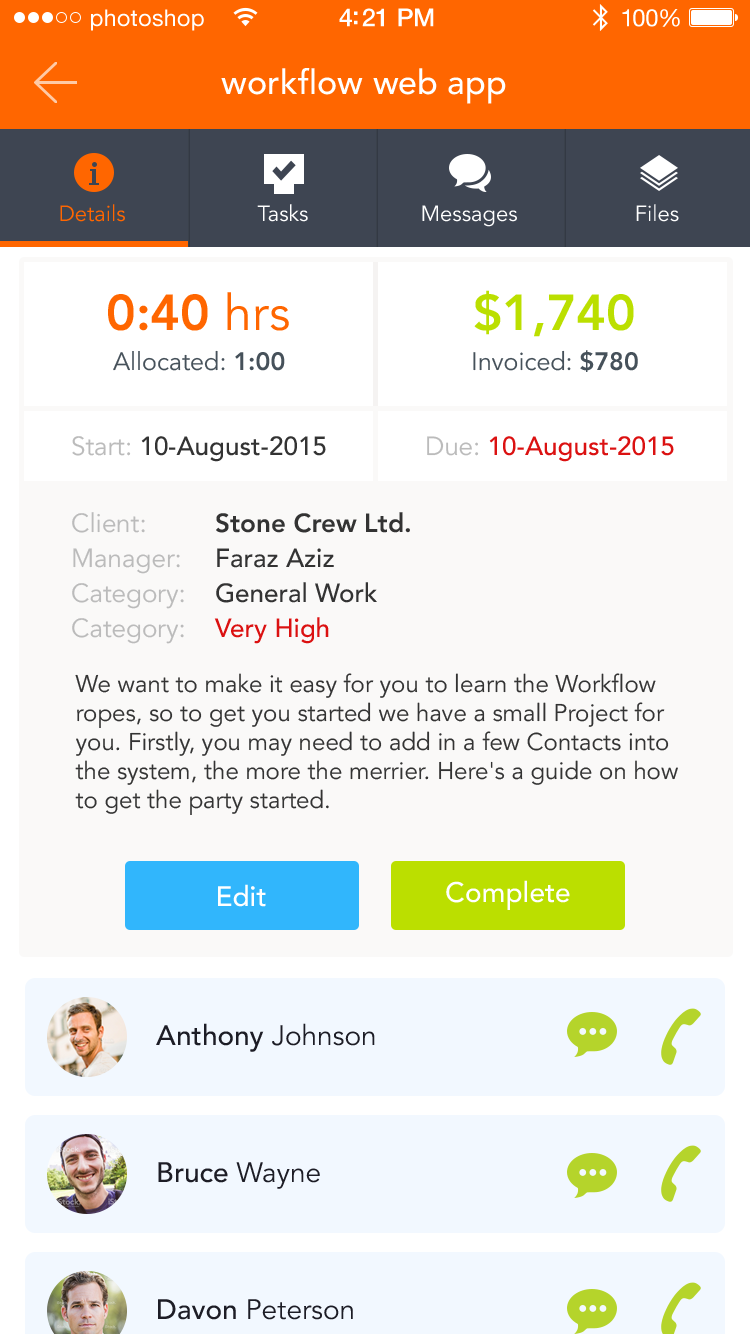
<style>
.page{position:relative;width:750px;height:1334px;background:#faf9f8}
.page>*{position:absolute;margin:0}
.t1{font:23px "HelveticaNeue";letter-spacing:0.02em;color:#ffffff}
.t2{font:25px "HelveticaNeue-Medium";letter-spacing:-0.02em;color:#ffffff}
.t3{font:24px "HelveticaNeue";letter-spacing:-0.02em;color:#ffffff}
.t4{font:34px "Avenir-Medium";color:#ffffff}
.t5{font:22px "Avenir-Book";color:#ff6600}
.t6{font:22px "Avenir-Book";color:#ffffff}
.t7{font:50px "Avenir-Heavy";color:#ff6600}
.t8{font:50px "Avenir-Book";color:#ff6600}
.t9{font:50px "Avenir-Heavy";color:#bbdf00}
.t10{font:25px "Avenir-Book";color:#46515a}
.t11{font:25px "Avenir-Heavy";color:#46515a}
.t12{font:26px "Avenir-Medium";color:#333333}
.t13{font:26px "Avenir-Book";color:#bbbbbb}
.t14{font:26px "Avenir-Medium";color:#db1111}
.t15{font:26px/35px "Avenir-Heavy";color:#333333}
.t16{font:26px/35px "Avenir-Book";color:#bbbbbb}
.t17{font:26px/35px "Avenir-Medium";color:#333333}
.t18{font:26px/35px "Avenir-Medium";color:#db1111}
.t19{font:24px "Avenir-Book";color:#333333}
.t20{font:28px "Avenir-Medium";color:#ffffff}
.t21{font:28px "Avenir-Medium";color:#1d1d26}
.t22{font:28px "Avenir-Book";color:#1d1d26}
</style>
<div class="page">
<p class="t1" style="left:91px;top:9px;width:113px;height:22px">photoshop</p>
<p class="t2" style="left:339px;top:8px;width:95px;height:19px">4:21 PM</p>
<p class="t3" style="left:622px;top:9px;width:58px;height:18px">100%</p>
<p class="t4" style="left:221px;top:68px;width:285px;height:36px">workflow web app</p>
<p class="t5" style="left:60px;top:204px;width:65px;height:18px">Details</p>
<p class="t6" style="left:257px;top:204px;width:51px;height:18px">Tasks</p>
<p class="t6" style="left:422px;top:205px;width:95px;height:22px">Messages</p>
<p class="t6" style="left:636px;top:204px;width:43px;height:18px">Files</p>
<p class="t7" style="left:108px;top:292px;width:181px;height:39px">0:40 <span class="t8">hrs</span></p>
<p class="t9" style="left:474px;top:290px;width:160px;height:47px">$1,740</p>
<p class="t10" style="left:113px;top:350px;width:172px;height:21px">Allocated: <span class="t11">1:00</span></p>
<p class="t10" style="left:473px;top:350px;width:165px;height:22px">Invoiced: <span class="t11">$780</span></p>
<p class="t12" style="left:72px;top:436px;width:254px;height:26px"><span class="t13">Start: </span>10-August-2015</p>
<p class="t14" style="left:427px;top:436px;width:247px;height:26px"><span class="t13">Due: </span>10-August-2015</p>
<p class="t15" style="left:72px;top:512px;width:338px;height:132px"><span class="t16">Client:   </span>Stone Crew Ltd.<br><span class="t16">Manager:  </span><span class="t17">Faraz Aziz<br></span><span class="t16">Category:  </span><span class="t17">General Work<br></span><span class="t16">Category:  </span><span class="t18">Very High</span></p>
<p class="t19" style="left:75px;top:673px;width:603px;height:142px">We want to make it easy for you to learn the Workflow ropes, so to get you started we have a small Project for you. Firstly, you may need to add in a few Contacts into the system, the more the merrier. Here's a guide on how to get the party started.</p>
<p class="t20" style="left:446px;top:880px;width:124px;height:30px">Complete</p>
<p class="t20" style="left:218px;top:884px;width:48px;height:23px">Edit</p>
<p class="t21" style="left:156px;top:1023px;width:219px;height:29px">Anthony <span class="t22">Johnson</span></p>
<p class="t21" style="left:158px;top:1162px;width:162px;height:27px">Bruce <span class="t22">Wayne</span></p>
<p class="t22" style="left:158px;top:1299px;width:195px;height:21px"><span class="t21">Davon </span>Peterson</p>
</div>
